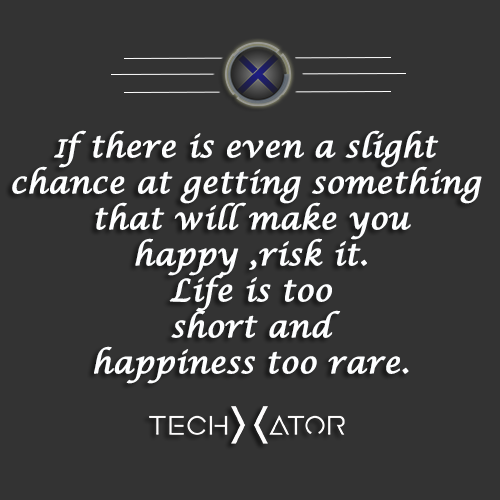
<style>
.page{position:relative;width:500px;height:500px;background:#333333}
.page>*{position:absolute;margin:0}
.t1{font:30px "LucidaCalligraphy-Italic";color:#fdfeff;font-weight:bold}
.t2{font:24px "LucidaCalligraphy-Italic";color:#fdfeff;font-weight:bold}
</style>
<div class="page">
<p class="t1" style="left:12px;top:130px;width:470px;height:254px;text-align:center"><span class="t2">I</span>f there is even a slight <br>chance at getting something <br>that will make you<br>happy ,risk it.<br> Life is too <br>short and<br>happiness too rare.</p>
</div>
